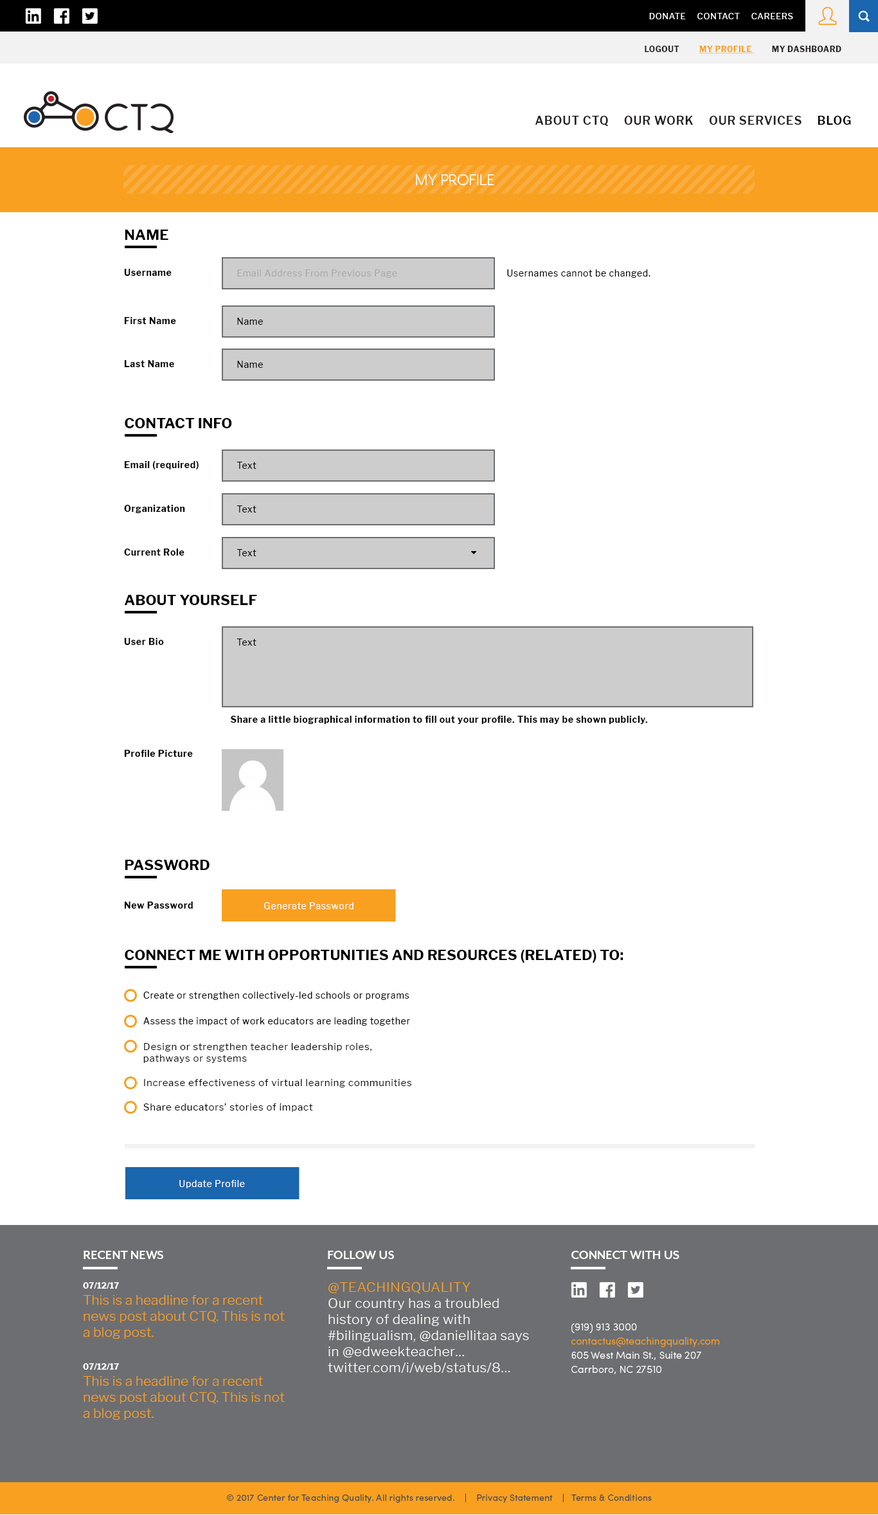
<style>
.page{position:relative;width:878px;height:1515px;background:#ffffff}
.page>*{position:absolute;margin:0}
.t1{font:8.4px "LibreFranklin-Regular";letter-spacing:0.05em;color:#ffffff}
.t2{font:7.7px "LibreFranklin-Bold";letter-spacing:0.05em;color:#231f20}
.t3{font:7.7px "LibreFranklin-Bold";letter-spacing:0.05em;color:#f9a020;text-decoration:underline}
.t4{font:11.6px "LibreFranklin-SemiBold";letter-spacing:0.05em;color:#231f20}
.t5{font:11.6px "LibreFranklin-SemiBold";letter-spacing:0.05em;color:#000000}
.t6{font:17.4px "MrEavesXLModOT-Book";letter-spacing:0.005em;color:#ffffff}
.t7{font:14.1px "LibreFranklin-Bold";letter-spacing:0.005em;color:#000000;text-transform:uppercase}
.t8{font:9px "LibreFranklin-Bold";letter-spacing:0.05em;color:#000000}
.t9{font:9px "LibreFranklin-Regular";letter-spacing:0.05em;color:#aaaaaa}
.t10{font:9px "LibreFranklin-Regular";letter-spacing:0.05em;color:#000000}
.t11{font:9px "LibreFranklin-Regular";letter-spacing:0.05em;color:#ffffff}
.t12{font:9.6px "LibreFranklin-Regular";letter-spacing:0.05em;color:#000000}
.t13{font:13.5px "MrEavesXLModOT-Bold";color:#ffffff}
.t14{font:13.5px/16.1px "LibreFranklin-Light";color:#f9a020}
.t15{font:8.4px/16.1px "LibreFranklin-Bold";color:#ffffff}
.t16{font:13.5px/16.1px "LibreFranklin-Light";letter-spacing:0.02em;color:#ffffff}
.t17{font:13.5px/16.1px "LibreFranklin-Light";letter-spacing:0.02em;color:#f9a020}
.t18{font:10.3px/14.1px "SofiaProLight";color:#ffffff}
.t19{font:10.3px/14.1px "SofiaProLight";color:#f9a020}
.t20{font:9px "SofiaProRegular";letter-spacing:0.01em;color:#505151}
</style>
<div class="page">
<p class="t1" style="left:649px;top:13px;width:144px;height:6px">DONATE     CONTACT     CAREERS</p>
<p class="t2" style="left:645px;top:46px;width:197px;height:8px">LOGOUT          <span class="t3">MY PROFILE </span>         MY DASHBOARD</p>
<p class="t4" style="left:535px;top:116px;width:316px;height:10px">ABOUT CTQ     OUR WORK     OUR SERVICES     <span class="t5">BLOG</span></p>
<p class="t6" style="left:416px;top:174px;width:78px;height:11px">MY PROFILE</p>
<p class="t7" style="left:125px;top:230px;width:43px;height:10px">Name</p>
<p class="t8" style="left:124px;top:269px;width:48px;height:7px">Username</p>
<p class="t9" style="left:237px;top:269px;width:160px;height:9px">Email Address From Previous Page</p>
<p class="t10" style="left:507px;top:269px;width:144px;height:9px">Usernames cannot be changed.</p>
<p class="t8" style="left:124px;top:317px;width:52px;height:7px">First Name</p>
<p class="t10" style="left:237px;top:318px;width:26px;height:7px">Name</p>
<p class="t8" style="left:124px;top:360px;width:50px;height:7px">Last Name</p>
<p class="t10" style="left:237px;top:361px;width:26px;height:7px">Name</p>
<p class="t7" style="left:125px;top:418px;width:107px;height:10px">Contact Info</p>
<p class="t8" style="left:124px;top:461px;width:75px;height:8px">Email (required)</p>
<p class="t10" style="left:237px;top:462px;width:19px;height:7px">Text</p>
<p class="t8" style="left:124px;top:505px;width:61px;height:8px">Organization</p>
<p class="t10" style="left:237px;top:505px;width:19px;height:7px">Text</p>
<p class="t8" style="left:124px;top:548px;width:60px;height:7px">Current Role</p>
<p class="t10" style="left:237px;top:549px;width:19px;height:7px">Text</p>
<p class="t7" style="left:125px;top:595px;width:132px;height:10px">About Yourself</p>
<p class="t8" style="left:124px;top:638px;width:40px;height:7px">User Bio</p>
<p class="t10" style="left:237px;top:638px;width:19px;height:7px">Text</p>
<p class="t8" style="left:231px;top:716px;width:416px;height:8px">Share a little biographical information to fill out your profile. This may be shown publicly.</p>
<p class="t8" style="left:124px;top:750px;width:69px;height:7px">Profile Picture</p>
<p class="t7" style="left:125px;top:860px;width:85px;height:10px">Password</p>
<p class="t8" style="left:124px;top:901px;width:69px;height:7px">New Password</p>
<p class="t11" style="left:264px;top:902px;width:90px;height:7px">Generate Password</p>
<p class="t7" style="left:125px;top:950px;width:499px;height:12px">Connect me with opportunities and resources (related) to:</p>
<p class="t10" style="left:143px;top:991px;width:267px;height:9px">Create or strengthen collectively-led schools or programs</p>
<p class="t10" style="left:143px;top:1017px;width:267px;height:8px">Assess the impact of work educators are leading together</p>
<p class="t12" style="left:143px;top:1043px;width:229px;height:20px">Design or strengthen teacher leadership roles, <br>pathways or systems</p>
<p class="t12" style="left:144px;top:1079px;width:267px;height:8px">Increase effectiveness of virtual learning communities</p>
<p class="t12" style="left:143px;top:1103px;width:170px;height:9px">Share educators’ stories of impact</p>
<p class="t11" style="left:179px;top:1180px;width:66px;height:8px">Update Profile</p>
<p class="t13" style="left:84px;top:1250px;width:79px;height:9px">RECENT NEWS</p>
<p class="t13" style="left:328px;top:1250px;width:66px;height:9px">FOLLOW US</p>
<p class="t13" style="left:572px;top:1250px;width:108px;height:9px">CONNECT WITH US</p>
<p class="t14" style="left:83px;top:1282px;width:202px;height:56px"><span class="t15">07/12/17<br></span>This is a headline for a recent news post about CTQ. This is not a blog post.</p>
<p class="t16" style="left:328px;top:1282px;width:201px;height:90px"><span class="t17">@TEACHINGQUALITY<br></span>Our country has a troubled history of dealing with #bilingualism, @daniellitaa says in @edweekteacher… twitter.com/i/web/status/8…</p>
<p class="t18" style="left:572px;top:1323px;width:147px;height:51px">(919) 913 3000<br><span class="t19">contactus@teachingquality.com<br></span>605 West Main St., Suite 207<br>Carrboro, NC 27510</p>
<p class="t14" style="left:83px;top:1363px;width:202px;height:56px"><span class="t15">07/12/17<br></span>This is a headline for a recent news post about CTQ. This is not a blog post.</p>
<p class="t20" style="left:227px;top:1493px;width:425px;height:9px">© 2017 Center for Teaching Quality. All rights reserved.    |    Privacy Statement    |   Terms &amp; Conditions</p>
</div>
